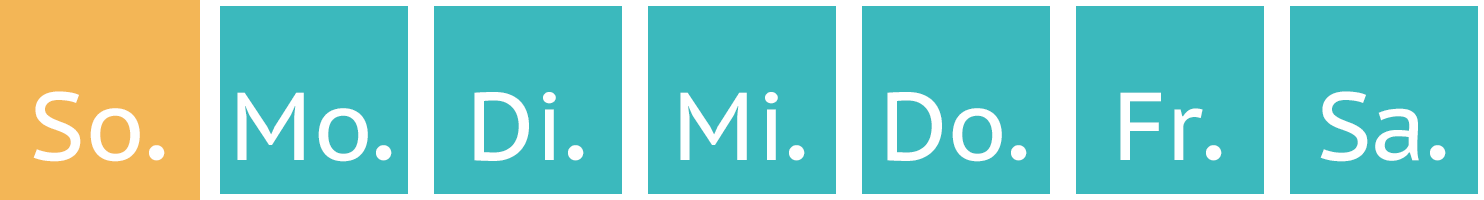
<style>
.page{position:relative;width:1484px;height:200px;background:#3bb9bd}
.page>*{position:absolute;margin:0}
.t1{font:96px "PTSans-Caption";color:#ffffff}
.t2{font:120px "PTSans-Caption";color:#ffffff}
.t3{font:96px "Lobster-Regular";color:#ffffff}
</style>
<div class="page">
<p class="t1" style="left:33px;top:91px;width:132px;height:71px"><span class="t2"><br></span>So<span class="t3">.</span></p>
<p class="t1" style="left:237px;top:92px;width:155px;height:70px"><span class="t2"><br></span>Mo<span class="t3">.</span></p>
<p class="t1" style="left:474px;top:92px;width:110px;height:69px"><span class="t2"><br></span>Di<span class="t3">.</span></p>
<p class="t1" style="left:680px;top:92px;width:125px;height:69px"><span class="t2"><br></span>Mi<span class="t3">.</span></p>
<p class="t1" style="left:887px;top:92px;width:140px;height:70px"><span class="t2"><br></span>Do<span class="t3">.</span></p>
<p class="t1" style="left:1120px;top:92px;width:102px;height:69px"><span class="t2"><br></span>Fr<span class="t3">.</span></p>
<p class="t1" style="left:1320px;top:91px;width:126px;height:71px"><span class="t2"><br></span>Sa<span class="t3">.</span></p>
</div>
